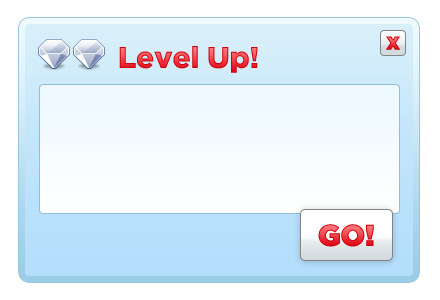
<style>
.page{position:relative;width:440px;height:300px;background:#ffffff}
.page>*{position:absolute;margin:0}
.t1{font:24px "Gotham-Black"}
.t2{font:30px "Gotham-Black";letter-spacing:-0.01em}
.t3{font:30px "Gotham-Ultra"}
</style>
<div class="page">
<p class="t1" style="left:386px;top:36px;width:14px;height:14px">x</p>
<p class="t2" style="left:119px;top:46px;width:139px;height:27px">Level Up!</p>
<p class="t3" style="left:318px;top:224px;width:56px;height:23px">GO!</p>
</div>
